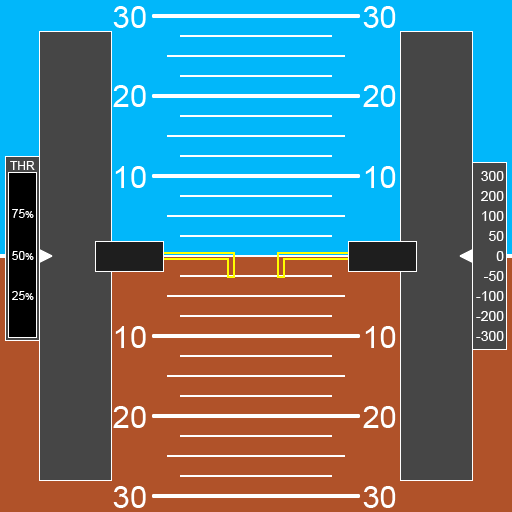
<style>
.page{position:relative;width:512px;height:512px;background:#b05229}
.page>*{position:absolute;margin:0}
.t1{font:12px "ArialMT";color:#ffffff}
.t2{font:14px "ArialMT";color:#ffffff}
.t3{font:10px "ArialMT";color:#ffffff}
</style>
<div class="page">
<p class="t1" style="left:10px;top:161px;width:25px;height:9px">THR</p>
<p class="t2" style="left:481px;top:171px;width:23px;height:10px">300</p>
<p class="t2" style="left:481px;top:191px;width:23px;height:10px">200</p>
<p class="t1" style="left:12px;top:209px;width:22px;height:9px">75<span class="t3">%</span></p>
<p class="t2" style="left:482px;top:211px;width:22px;height:10px">100</p>
<p class="t2" style="left:489px;top:231px;width:15px;height:10px">50</p>
<p class="t1" style="left:12px;top:251px;width:22px;height:9px">50<span class="t3">%</span></p>
<p class="t2" style="left:496px;top:251px;width:8px;height:10px">0</p>
<p class="t2" style="left:484px;top:271px;width:20px;height:10px">-50</p>
<p class="t1" style="left:12px;top:291px;width:22px;height:9px">25<span class="t3">%</span></p>
<p class="t2" style="left:476px;top:291px;width:28px;height:10px">-100</p>
<p class="t2" style="left:476px;top:311px;width:28px;height:10px">-200</p>
<p class="t2" style="left:476px;top:331px;width:28px;height:10px">-300</p>
</div>
